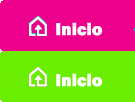
<style>
.page{position:relative;width:135px;height:102px;background:#ed008c}
.page>*{position:absolute;margin:0}
.t1{font:18px "FranklinGothic-Heavy";color:#ffffff}
</style>
<div class="page">
<p class="t1" style="left:56px;top:22px;width:47px;height:14px">Inicio</p>
<p class="t1" style="left:56px;top:73px;width:47px;height:14px">Inicio</p>
</div>
